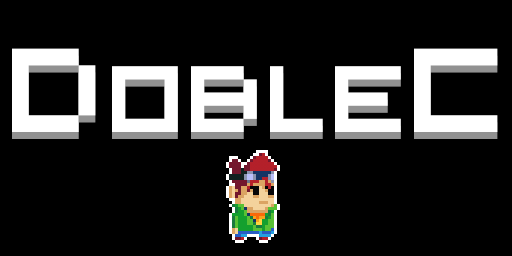
<style>
.page{position:relative;width:512px;height:256px;background:#000000}
.page>*{position:absolute;margin:0}
.t1{font:105.1px "5x5-Pixel";color:#ffffff}
.t2{font:133.1px "5x5-Pixel";color:#ffffff}
</style>
<div class="page">
<p class="t1" style="left:12px;top:48px;width:486px;height:84px"><span class="t2">D</span>OBLE<span class="t2">C</span></p>
<p class="t1" style="left:12px;top:55px;width:486px;height:84px;opacity:0.42"><span class="t2">D</span>OBLE<span class="t2">C</span></p>
</div>
